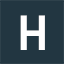
<style>
.page{position:relative;width:64px;height:64px;background:#223641}
.page>*{position:absolute;margin:0}
.t1{font:48px "Roboto-Bold";color:#fffefe;text-transform:uppercase;scale:0.87 1}
</style>
<div class="page">
<p class="t1" style="left:20px;top:15px;width:25px;height:35px">h</p>
</div>
